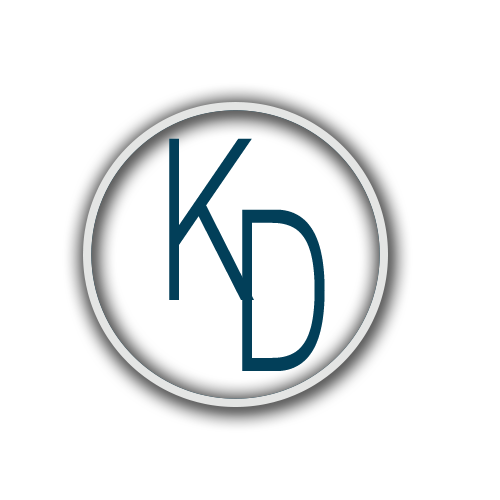
<style>
.page{position:relative;width:500px;height:500px;background:#ffffff}
.page>*{position:absolute;margin:0}
.t1{font:226px "HelveticaNeue-Light";letter-spacing:0.14em;color:#023f59;scale:0.63 1}
</style>
<div class="page">
<p class="t1" style="left:169px;top:138px;width:85px;height:162px">K</p>
<p class="t1" style="left:242px;top:209px;width:83px;height:162px">D</p>
</div>
